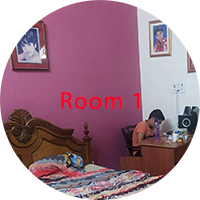
<style>
.page{position:relative;width:200px;height:200px;background:#ffffff}
.page>*{position:absolute;margin:0}
.t1{font:24px "MyriadPro-Regular";letter-spacing:0.06em;color:#ff001e}
</style>
<div class="page">
<p class="t1" style="left:61px;top:92px;width:79px;height:17px">Room 1</p>
</div>
